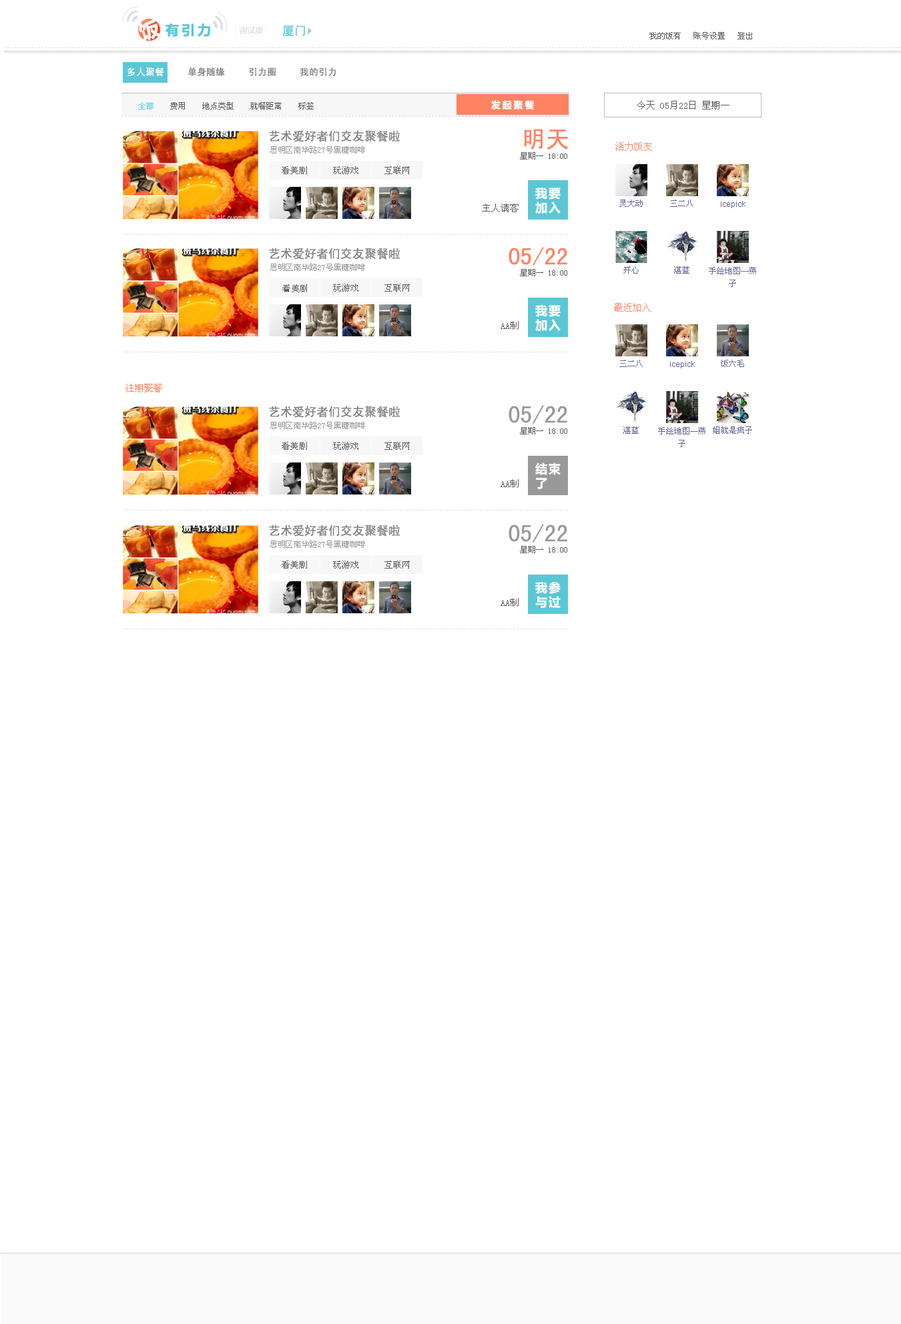
<style>
.page{position:relative;width:901px;height:1324px;background:#ffffff}
.page>*{position:absolute;margin:0}
.t1{font:20px "MicrosoftYaHei";letter-spacing:0.2em;color:#ffffff}
.t2{font:13.3px "MicrosoftYaHei";letter-spacing:0.2em;color:#5bc7d6}
.t3{font:12px "SimHei";color:#5bc7d6}
.t4{font:8px "SimSun";color:#5c5c5c}
.t5{font:9.3px "SimHei";color:#808080}
.t6{font:9.3px "SimHei";color:#ffffff}
.t7{font:9.3px "MicrosoftYaHei";letter-spacing:0.2em;color:#ffffff}
.t8{font:9.3px "SimSun";color:#5c5c5c}
.t9{font:8px "SimSun";color:#5bc7d6}
.t10{font:12px "SimHei";color:#808080}
.t11{font:24px "SimHei";color:#ff8262}
.t12{font:8px "SimSun";color:#999999}
.t13{font:9.3px "SimSun";color:#ff8262}
.t14{font:8.7px "SimSun";color:#5c5c5c}
.t15{font:12px "MicrosoftYaHei";letter-spacing:0.1em;color:#ffffff}
.t16{font:8.7px "AdobeHeitiStd-Regular";color:#5c5c5c}
.t17{font:24px "SimHei";color:#999999}
</style>
<div class="page">
<p class="t1" style="left:139px;top:19px;width:22px;height:22px;rotate:-18deg">饭</p>
<p class="t2" style="left:165px;top:23px;width:45px;height:14px">有引力</p>
<p class="t3" style="left:282px;top:25px;width:23px;height:12px">厦门</p>
<p class="t4" style="left:649px;top:32px;width:103px;height:7px">我的饭有   账号设置   登出</p>
<p class="t5" style="left:127px;top:67px;width:209px;height:10px"><span class="t6">多人聚餐     </span>单身随缘     引力圈     我的引力</p>
<p class="t7" style="left:491px;top:100px;width:43px;height:10px">发起聚餐</p>
<p class="t8" style="left:637px;top:101px;width:92px;height:8px">今天 05月22日 星期一</p>
<p class="t4" style="left:138px;top:102px;width:176px;height:7px"><span class="t9">全部    </span>费用    地点类型    就餐距离    标签</p>
<p class="t10" style="left:269px;top:130px;width:131px;height:12px">艺术爱好者们交友聚餐啦</p>
<p class="t11" style="left:524px;top:129px;width:44px;height:20px">明天</p>
<p class="t12" style="left:270px;top:146px;width:95px;height:7px">思明区南华路27号黑糖咖啡</p>
<p class="t13" style="left:615px;top:142px;width:37px;height:9px">活力饭友</p>
<p class="t4" style="left:520px;top:152px;width:47px;height:7px">星期一 18:00</p>
<p class="t14" style="left:282px;top:166px;width:25px;height:8px">看美剧</p>
<p class="t14" style="left:333px;top:166px;width:25px;height:8px">玩游戏</p>
<p class="t14" style="left:384px;top:166px;width:26px;height:8px">互联网</p>
<p class="t15" style="left:535px;top:187px;width:25px;height:27px">我要<br>加入</p>
<p class="t8" style="left:482px;top:204px;width:36px;height:8px">主人请客</p>
<p class="t10" style="left:269px;top:248px;width:131px;height:12px">艺术爱好者们交友聚餐啦</p>
<p class="t11" style="left:508px;top:247px;width:59px;height:19px">05/22</p>
<p class="t12" style="left:270px;top:264px;width:95px;height:7px">思明区南华路27号黑糖咖啡</p>
<p class="t4" style="left:520px;top:269px;width:47px;height:7px">星期一 18:00</p>
<p class="t16" style="left:282px;top:284px;width:25px;height:8px">看美剧</p>
<p class="t14" style="left:333px;top:284px;width:25px;height:8px">玩游戏</p>
<p class="t14" style="left:384px;top:284px;width:26px;height:8px">互联网</p>
<p class="t15" style="left:535px;top:305px;width:25px;height:27px">我要<br>加入</p>
<p class="t13" style="left:614px;top:303px;width:37px;height:9px">最近加入</p>
<p class="t8" style="left:500px;top:321px;width:18px;height:9px">AA制</p>
<p class="t13" style="left:125px;top:384px;width:37px;height:8px">往期聚餐</p>
<p class="t10" style="left:269px;top:406px;width:131px;height:12px">艺术爱好者们交友聚餐啦</p>
<p class="t17" style="left:508px;top:405px;width:59px;height:19px">05/22</p>
<p class="t12" style="left:270px;top:422px;width:95px;height:7px">思明区南华路27号黑糖咖啡</p>
<p class="t4" style="left:520px;top:427px;width:47px;height:7px">星期一 18:00</p>
<p class="t14" style="left:282px;top:442px;width:25px;height:8px">看美剧</p>
<p class="t14" style="left:333px;top:442px;width:25px;height:8px">玩游戏</p>
<p class="t14" style="left:384px;top:442px;width:26px;height:8px">互联网</p>
<p class="t15" style="left:535px;top:462px;width:25px;height:27px">结束<br>了</p>
<p class="t8" style="left:500px;top:479px;width:18px;height:9px">AA制</p>
<p class="t10" style="left:269px;top:524px;width:131px;height:12px">艺术爱好者们交友聚餐啦</p>
<p class="t17" style="left:508px;top:524px;width:59px;height:18px">05/22</p>
<p class="t12" style="left:270px;top:540px;width:95px;height:8px">思明区南华路27号黑糖咖啡</p>
<p class="t4" style="left:520px;top:546px;width:47px;height:7px">星期一 18:00</p>
<p class="t14" style="left:282px;top:560px;width:25px;height:8px">看美剧</p>
<p class="t14" style="left:333px;top:560px;width:25px;height:8px">玩游戏</p>
<p class="t14" style="left:384px;top:560px;width:26px;height:8px">互联网</p>
<p class="t15" style="left:535px;top:581px;width:25px;height:27px">我参<br>与过</p>
<p class="t8" style="left:500px;top:598px;width:18px;height:9px">AA制</p>
</div>
